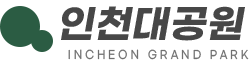
<style>
.page{position:relative;width:249px;height:61px;background:#ffffff}
.page>*{position:absolute;margin:0}
.t1{font:38.6px "GmarketSansTTFBold";color:#474747;font-style:italic}
.t2{font:11.4px "GmarketSansTTFMedium";letter-spacing:0.34em;color:#707070;text-transform:uppercase;scale:0.84 1}
</style>
<div class="page">
<p class="t1" style="left:61px;top:6px;width:184px;height:35px">인천대공원</p>
<p class="t2" style="left:68px;top:49px;width:181px;height:11px">Incheon Grand Park</p>
</div>
